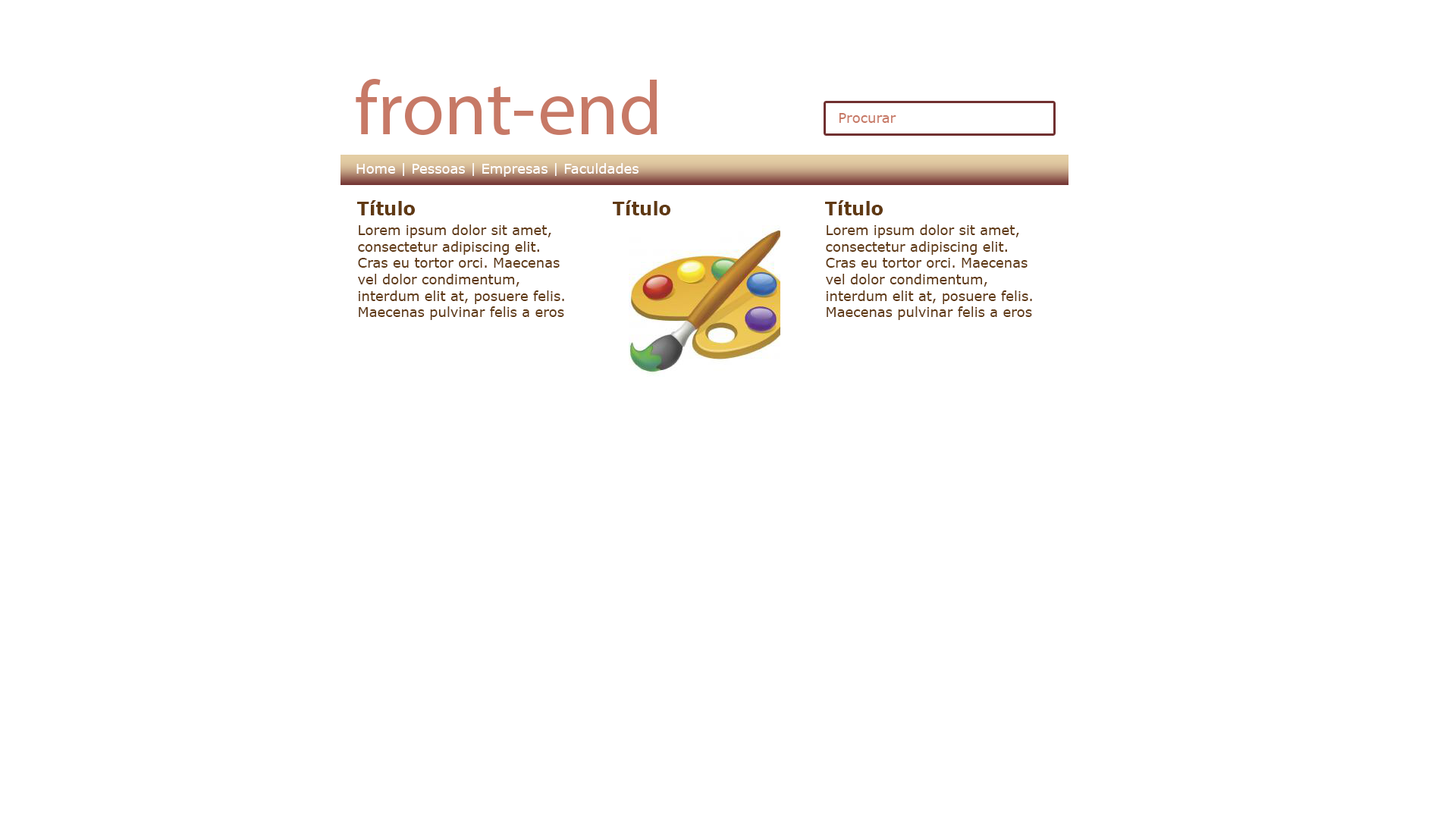
<style>
.page{position:relative;width:1456px;height:819px;background:#ffffff}
.page>*{position:absolute;margin:0}
.t1{font:77.3px "MyriadPro-Regular";color:#c77966}
.t2{font:13.6px "Verdana";color:#c77966}
.t3{font:13.6px "Verdana";color:#ffffff}
.t4{font:18.2px "Verdana-Bold";color:#603913}
.t5{font:13.6px "Verdana";color:#603913}
</style>
<div class="page">
<p class="t1" style="left:356px;top:79px;width:301px;height:56px">front-end</p>
<p class="t2" style="left:839px;top:113px;width:57px;height:10px">Procurar</p>
<p class="t3" style="left:356px;top:163px;width:283px;height:14px">Home | Pessoas | Empresas | Faculdades</p>
<p class="t4" style="left:357px;top:200px;width:58px;height:15px">Título</p>
<p class="t4" style="left:613px;top:200px;width:57px;height:15px">Título</p>
<p class="t4" style="left:825px;top:200px;width:58px;height:15px">Título</p>
<p class="t5" style="left:358px;top:224px;width:206px;height:96px">Lorem ipsum dolor sit amet, <br>consectetur adipiscing elit. <br>Cras eu tortor orci. Maecenas <br>vel dolor condimentum, <br>interdum elit at, posuere felis.<br>Maecenas pulvinar felis a eros</p>
<p class="t5" style="left:826px;top:224px;width:206px;height:96px">Lorem ipsum dolor sit amet, <br>consectetur adipiscing elit. <br>Cras eu tortor orci. Maecenas <br>vel dolor condimentum, <br>interdum elit at, posuere felis.<br>Maecenas pulvinar felis a eros</p>
</div>
